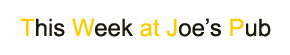
<style>
.page{position:relative;width:290px;height:55px;background:#ffffff}
.page>*{position:absolute;margin:0}
.t1{font:24px "ArialMT";color:#ffcc00}
.t2{font:24px "ArialMT";color:#191809}
</style>
<div class="page">
<p class="t1" style="left:20px;top:18px;width:251px;height:19px">T<span class="t2">his</span> W<span class="t2">eek</span> at J<span class="t2">oe’s</span> P<span class="t2">ub</span></p>
</div>
